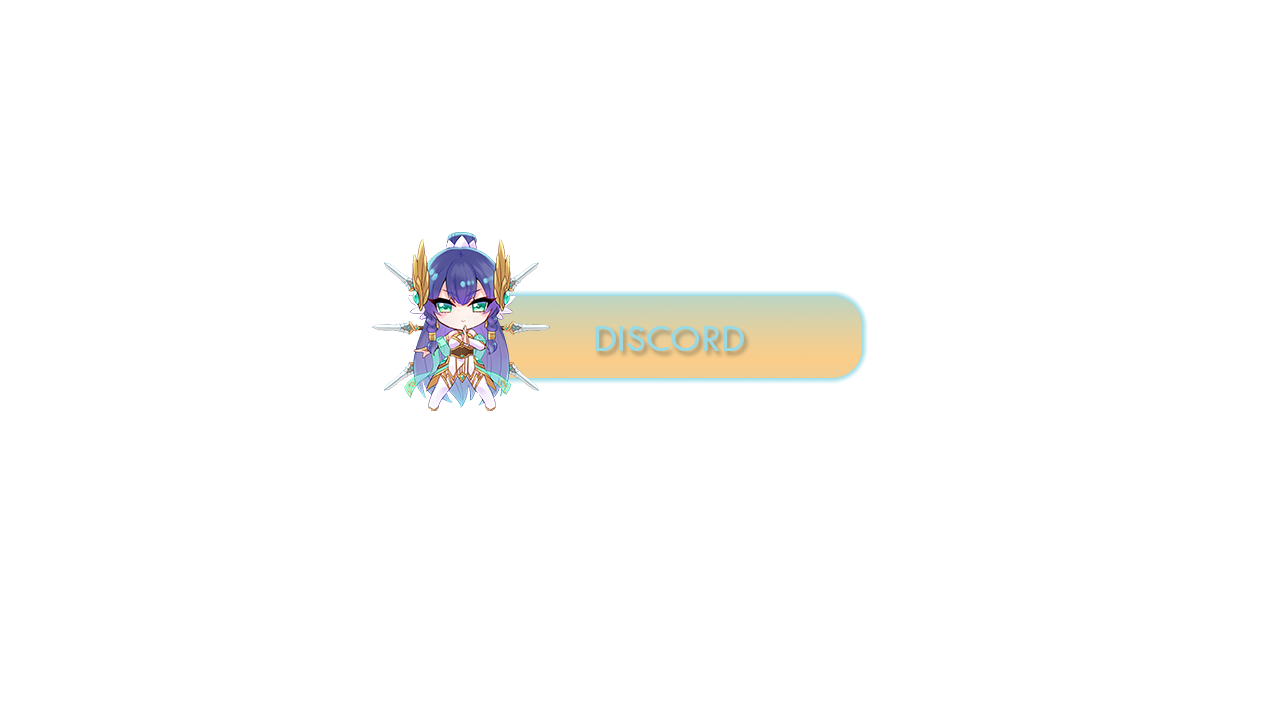
<style>
.page{position:relative;width:1280px;height:720px;background:#ffffff}
.page>*{position:absolute;margin:0}
.t1{font:40px "TwCenMT-Regular";color:#97dae6}
</style>
<div class="page">
<p class="t1" style="left:595px;top:326px;width:149px;height:25px">DISCORD</p>
</div>
